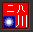
<style>
.page{position:relative;width:33px;height:32px;background:#f20000}
.page>*{position:absolute;margin:0}
.t1{font:10.4px "SimSun";color:#ffffff}
.t2{font:11.7px "SimSun";color:#ffffff}
</style>
<div class="page">
<p class="t1" style="left:7px;top:5px;width:18px;height:8px">二八</p>
<p class="t2" style="left:16px;top:15px;width:11px;height:12px">川</p>
</div>
